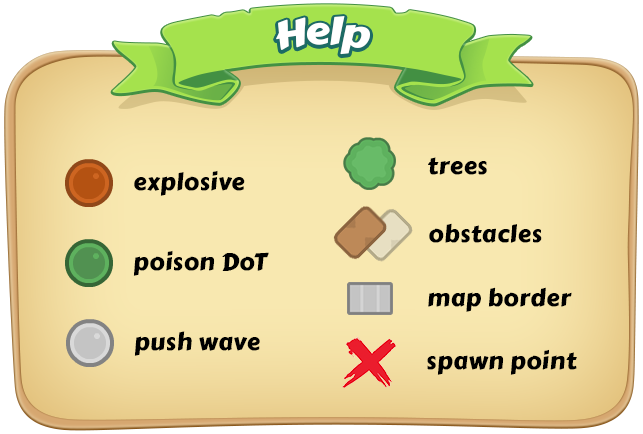
<style>
.page{position:relative;width:643px;height:434px}
.page>*{position:absolute;margin:0}
.t1{font:38px "CarterOne";letter-spacing:-0.02em;color:#ffffff}
.t2{font:24px "CarterOne";letter-spacing:0.02em;color:#000000}
</style>
<div class="page">
<p class="t1" style="left:276px;top:16px;width:94px;height:39px">Help</p>
<p class="t2" style="left:428px;top:157px;width:59px;height:18px">trees</p>
<p class="t2" style="left:134px;top:170px;width:111px;height:26px">explosive</p>
<p class="t2" style="left:429px;top:223px;width:113px;height:20px">obstacles</p>
<p class="t2" style="left:133px;top:250px;width:136px;height:26px">poison DoT</p>
<p class="t2" style="left:428px;top:287px;width:144px;height:25px">map border</p>
<p class="t2" style="left:134px;top:331px;width:126px;height:25px">push wave</p>
<p class="t2" style="left:427px;top:349px;width:150px;height:26px">spawn point</p>
</div>
